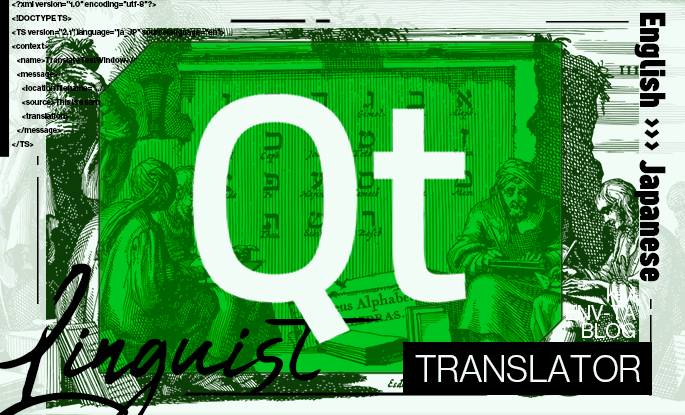
<style>
.page{position:relative;width:685px;height:415px}
.page>*{position:absolute;margin:0}
.t1{font:8px "NHaasGroteskDSPro-75Bd";color:#000000}
.t2{font:8px "NHaasGroteskDSPro-55Rg";color:#000000}
.t3{font:37.8px "SugoProClassicTrial-Bold";color:#000000}
.t4{font:20.3px/18px "NHaasGroteskDSPro-55Rg";color:#ffffff}
.t5{font:36.3px "NHaasGroteskDSPro-45Lt";color:#f2fcf7}
</style>
<div class="page">
<p class="t1" style="left:12px;top:0px;width:213px;height:147px">&lt;?xml version="1.0" encoding="utf-8"?&gt;<br>&lt;!DOCTYPE TS&gt;<br>&lt;TS version="2.1" language="ja_JP" sourcelanguage="en"&gt;<br>&lt;context&gt;<br>    &lt;name&gt;TranslateTestWindow&lt;/name&gt;<br>    &lt;message&gt;<br>        &lt;location filename="../../translate_test.py" line="22"/&gt;<br>        &lt;source&gt;This is a sample text.&lt;/source&gt;<br>        &lt;translation&gt;<span class="t2">これはサンプルテキストです。</span>&lt;/translation&gt;<br>    &lt;/message&gt;<br>&lt;/TS&gt;</p>
<p class="t3" style="left:634px;top:12px;width:32px;height:270px;rotate:90deg">English &gt;&gt;&gt; Japanese</p>
<p class="t4" style="left:566px;top:287px;width:70px;height:51px;text-align:right">KM<br>ENV-TA<br>BLOG</p>
<p class="t5" style="left:415px;top:355px;width:225px;height:27px">TRANSLATOR</p>
</div>
